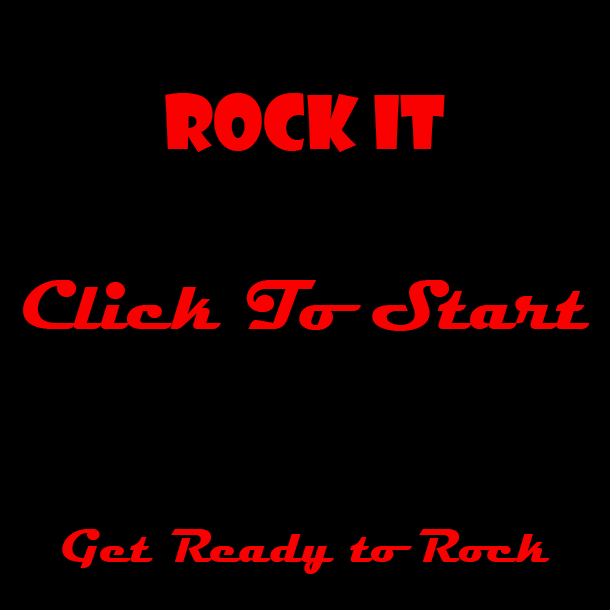
<style>
.page{position:relative;width:610px;height:610px;background:#000000}
.page>*{position:absolute;margin:0}
.t1{font:72px "ShowcardGothic-Reg";color:#f90101}
.t2{font:72px "Magneto-Bold";color:#f90101}
.t3{font:48px "Magneto-Bold";color:#f90101}
</style>
<div class="page">
<p class="t1" style="left:165px;top:93px;width:280px;height:59px">Rock IT</p>
<p class="t2" style="left:23px;top:280px;width:566px;height:51px">Click To Start</p>
<p class="t3" style="left:62px;top:529px;width:488px;height:45px">Get Ready to Rock</p>
</div>
